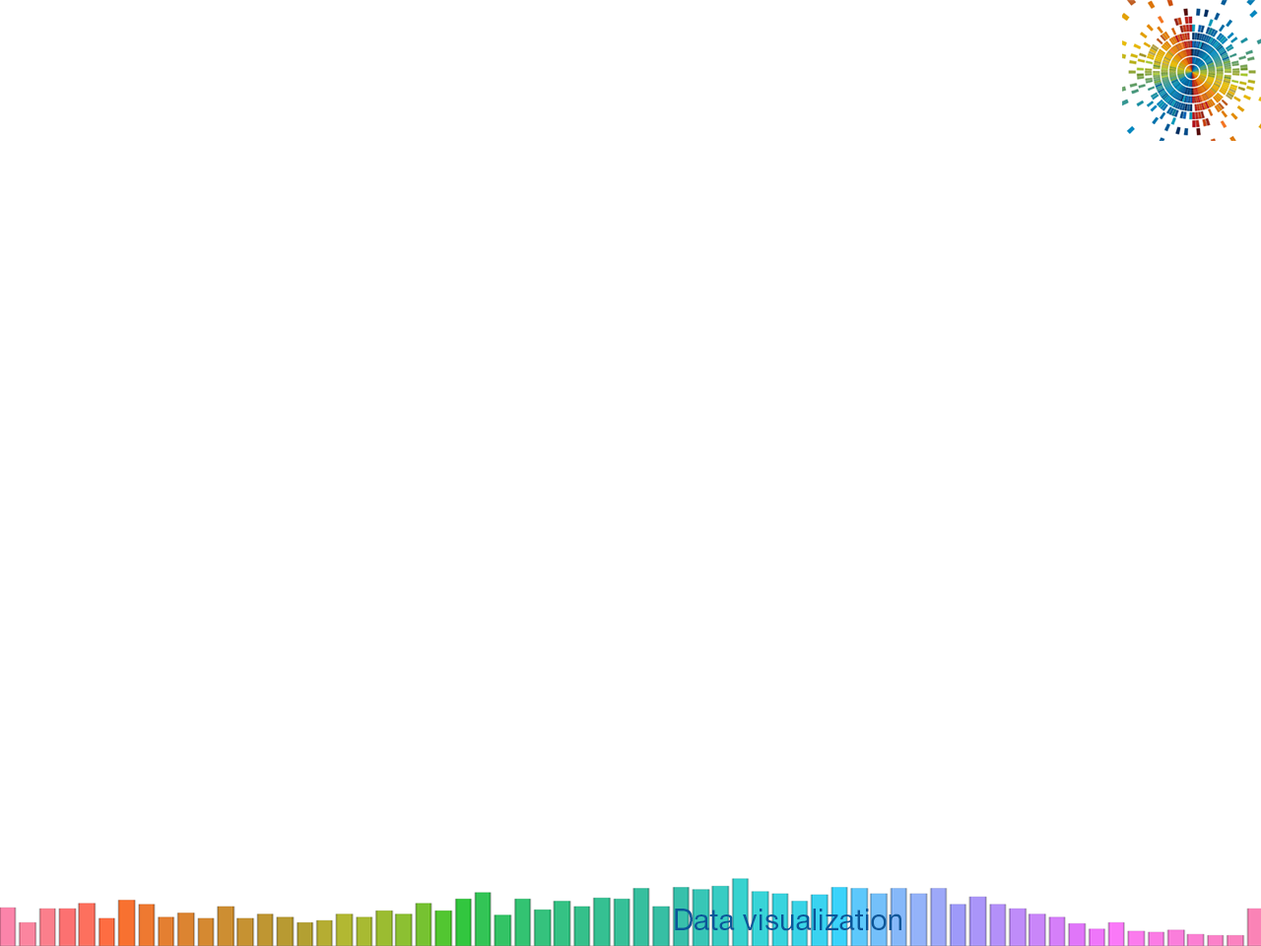
<style>
.page{position:relative;width:1261px;height:946px;background:#ffffff}
.page>*{position:absolute;margin:0}
.t1{font:29.6px "HelveticaNeueCyr-Roman";color:#0b5699}
</style>
<div class="page">
<p class="t1" style="left:675px;top:908px;width:226px;height:23px">Data visualization</p>
</div>
